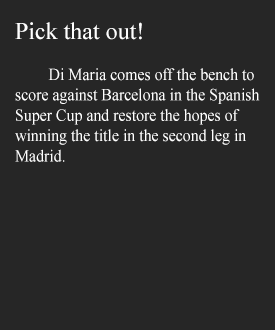
<style>
.page{position:relative;width:275px;height:330px;background:#262626}
.page>*{position:absolute;margin:0}
.t1{font:24px "TimesNewRomanPSMT";color:#ffffff}
.t2{font:17px "TimesNewRomanPSMT";color:#ffffff;scale:0.93 1}
</style>
<div class="page">
<p class="t1" style="left:15px;top:22px;width:127px;height:18px">Pick that out!</p>
<p class="t2" style="left:15px;top:68px;width:245px;height:94px">Di Maria comes off the bench to <br>score against Barcelona in the Spanish<br>Super Cup and restore the hopes of <br>winning the title in the second leg in <br>Madrid.</p>
</div>
